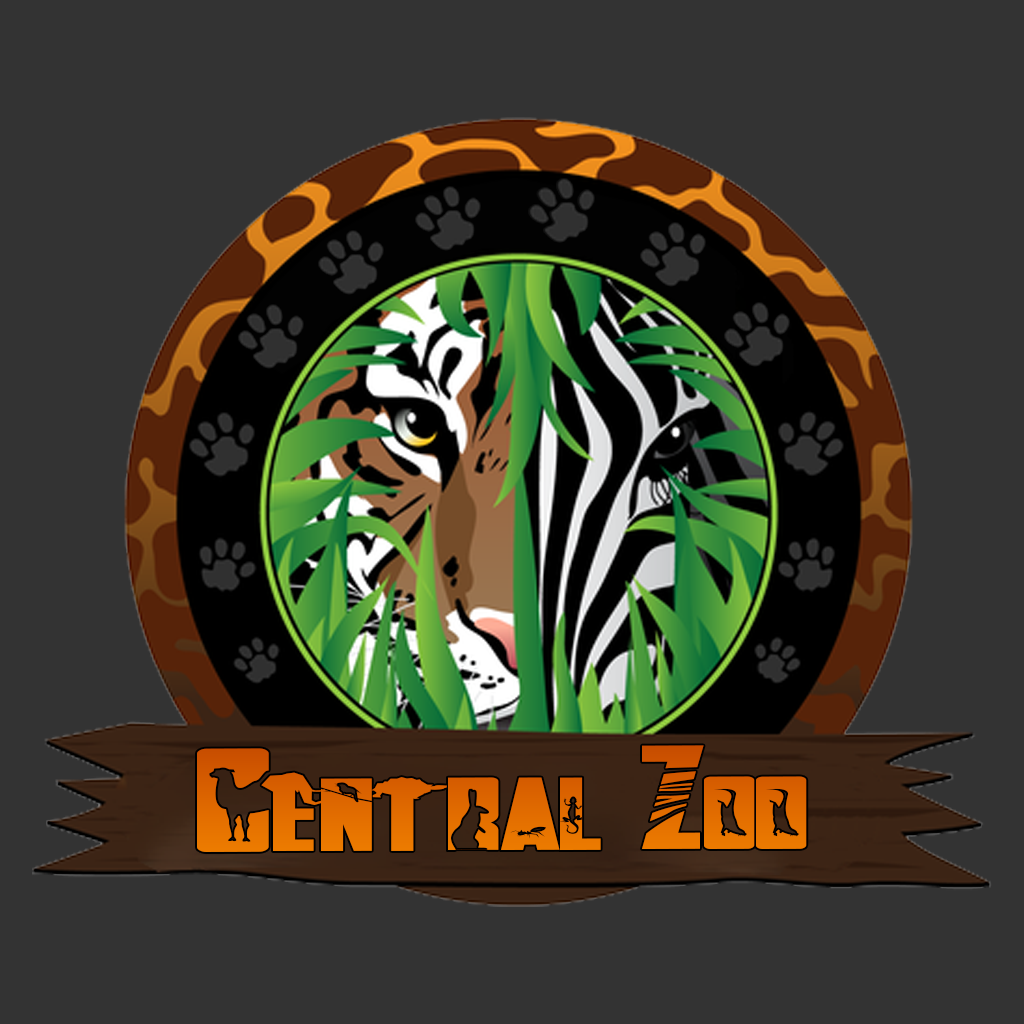
<style>
.page{position:relative;width:1024px;height:1024px;background:#333333}
.page>*{position:absolute;margin:0}
.t1{font:147.4px "FalturaAnimals";color:#e06b00;font-variant:small-caps;scale:1.86 1}
</style>
<div class="page">
<p class="t1" style="left:197px;top:745px;width:610px;height:107px">Central Zoo</p>
</div>
